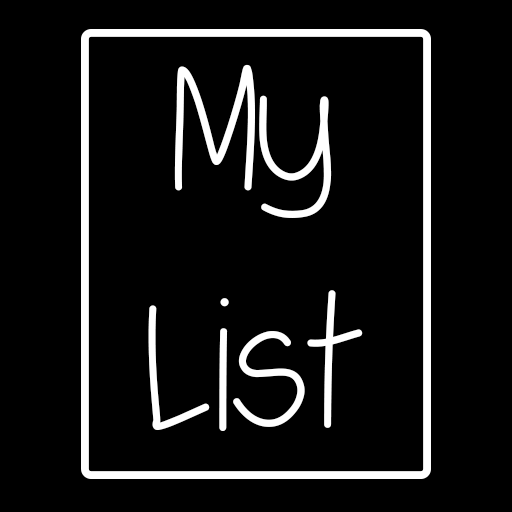
<style>
.page{position:relative;width:512px;height:512px;background:#000000}
.page>*{position:absolute;margin:0}
.t1{font:200px "SwaggerLight";color:#ffffff}
</style>
<div class="page">
<p class="t1" style="left:148px;top:64px;width:215px;height:367px;text-align:center">My<br>List</p>
</div>
